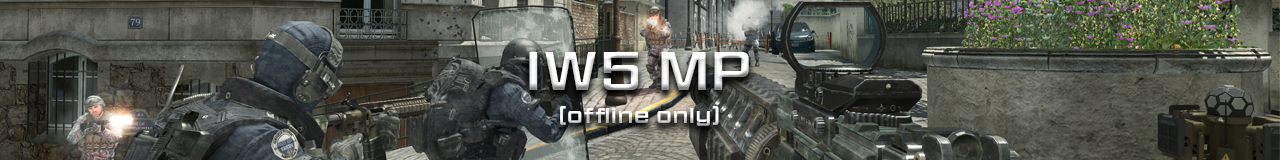
<style>
.page{position:relative;width:1280px;height:160px}
.page>*{position:absolute;margin:0}
.t1{font:50px "HitmarkerNormal-Regular";letter-spacing:0.12em;color:#ffffff}
.t2{font:20px "HitmarkerNormal-Regular";letter-spacing:0.12em}
</style>
<div class="page">
<p class="t1" style="left:529px;top:52px;width:220px;height:38px">IW5 MP</p>
<p class="t2" style="left:560px;top:106px;width:159px;height:20px">(offline only)</p>
</div>
